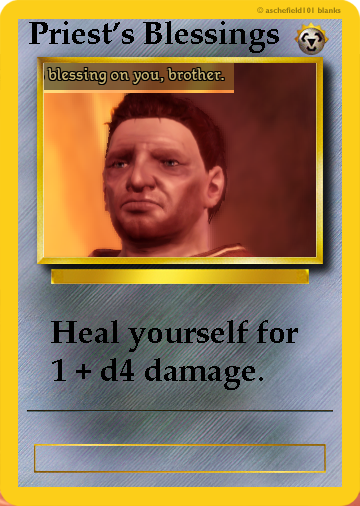
<style>
.page{position:relative;width:360px;height:506px}
.page>*{position:absolute;margin:0}
.t1{font:32px "PalatinoLinotype-Bold";color:#000000}
</style>
<div class="page">
<p class="t1" style="left:29px;top:21px;width:250px;height:32px">Priest’s Blessings</p>
<p class="t1" style="left:51px;top:320px;width:247px;height:70px">Heal yourself for 1 + d4 damage.</p>
</div>
